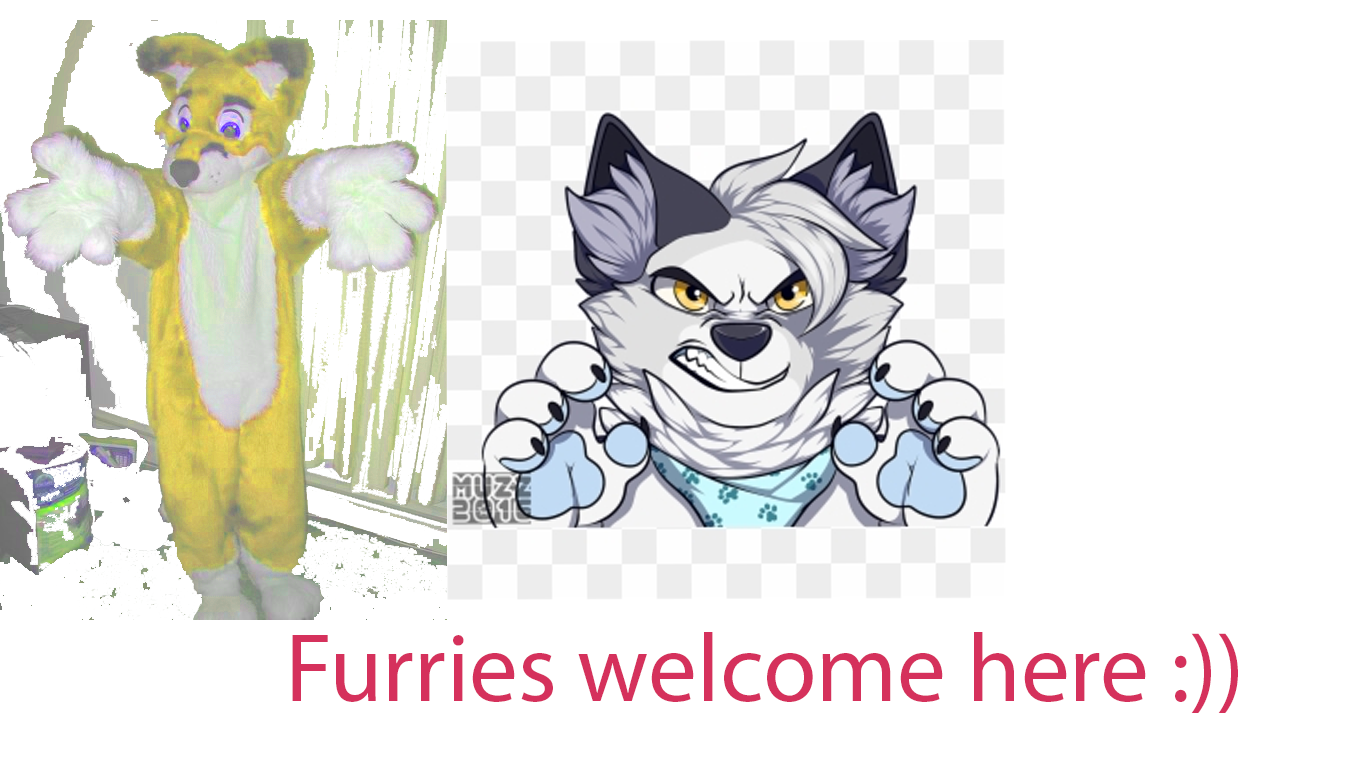
<style>
.page{position:relative;width:1366px;height:768px;background:#ffffff}
.page>*{position:absolute;margin:0}
.t1{font:97.3px "MyriadPro-Regular";color:#d5315c}
</style>
<div class="page">
<p class="t1" style="left:292px;top:632px;width:946px;height:81px">Furries welcome here :))</p>
</div>
